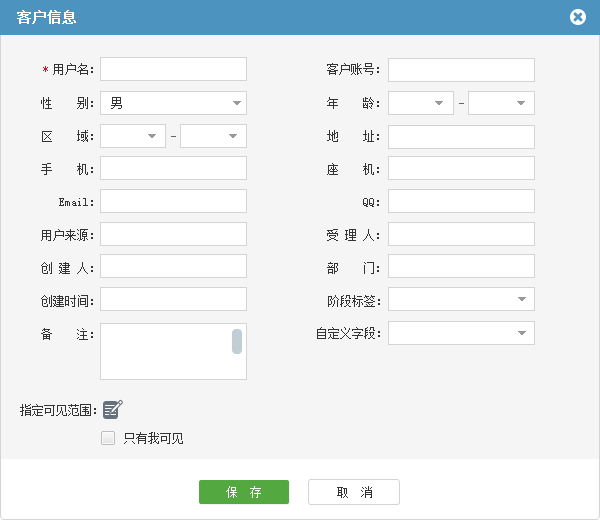
<style>
.page{position:relative;width:600px;height:520px;background:#f5f5f5}
.page>*{position:absolute;margin:0}
.t1{font:14px "SimSun";color:#ffffff;font-weight:bold}
.t2{font:12px "SimSun";color:#333333}
.t3{font:12px "SimSun";color:#c81623}
.t4{font:12px/33px "SimSun";color:#333333}
.t5{font:12px "SimSun";color:#ffffff}
</style>
<div class="page">
<p class="t1" style="left:17px;top:10px;width:59px;height:14px">客户信息</p>
<p class="t2" style="left:43px;top:63px;width:50px;height:12px"><span class="t3">*</span>用户名：</p>
<p class="t2" style="left:327px;top:63px;width:52px;height:12px">客户账号：</p>
<p class="t2" style="left:41px;top:97px;width:52px;height:12px">性    别：</p>
<p class="t2" style="left:111px;top:97px;width:11px;height:12px">男</p>
<p class="t2" style="left:327px;top:97px;width:52px;height:12px">年    龄：</p>
<p class="t4" style="left:41px;top:130px;width:339px;height:177px">区    域：                                     地    址：<br>手    机：                                     座    机：<br>   Email：                                           QQ：<br>用户来源：                                      受 理 人：<br>创 建 人：                                      部    门：<br>创建时间：                                      阶段标签：</p>
<p class="t2" style="left:41px;top:328px;width:52px;height:12px">备    注：</p>
<p class="t2" style="left:317px;top:327px;width:63px;height:12px">自定义字段：</p>
<p class="t2" style="left:20px;top:404px;width:76px;height:12px">指定可见范围：</p>
<p class="t2" style="left:124px;top:432px;width:59px;height:12px">只有我可见</p>
<p class="t5" style="left:226px;top:486px;width:35px;height:12px">保　存</p>
<p class="t2" style="left:337px;top:486px;width:35px;height:12px">取  消</p>
</div>
